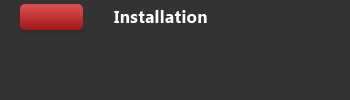
<style>
.page{position:relative;width:350px;height:100px;background:#333333}
.page>*{position:absolute;margin:0}
.t1{font:17px "Gadugi-Bold";letter-spacing:0.02em;color:#ffffff}
</style>
<div class="page">
<p class="t1" style="left:114px;top:10px;width:93px;height:13px">Installation</p>
</div>
